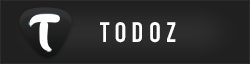
<style>
.page{position:relative;width:250px;height:64px;background:#202020}
.page>*{position:absolute;margin:0}
.t1{font:27.6px "DINCondensed-Bold";letter-spacing:0.2em;color:#ffffff}
</style>
<div class="page">
<p class="t1" style="left:100px;top:22px;width:76px;height:21px">TODOZ</p>
</div>
